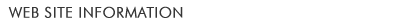
<style>
.page{position:relative;width:400px;height:24px;background:#ffffff}
.page>*{position:absolute;margin:0}
.t1{font:14.7px "FuturaBT-Light";letter-spacing:0.025em;color:#363636;text-transform:uppercase;font-weight:bold}
</style>
<div class="page">
<p class="t1" style="left:8px;top:6px;width:175px;height:12px">WEB SITE INFORMATION</p>
</div>
